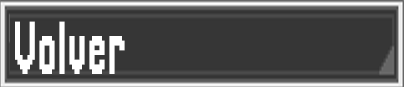
<style>
.page{position:relative;width:404px;height:87px;background:#363636}
.page>*{position:absolute;margin:0}
.t1{font:76px "Pixellari";color:#ffffff;scale:0.52 1}
</style>
<div class="page">
<p class="t1" style="left:15px;top:21px;width:110px;height:53px">Volver</p>
</div>
